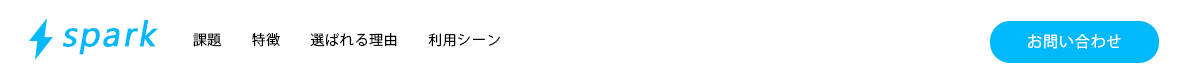
<style>
.page{position:relative;width:1200px;height:80px;background:#ffffff}
.page>*{position:absolute;margin:0}
.t1{font:34.9px "Gadugi";letter-spacing:0.05em;color:#00b9fb;font-weight:bold;font-style:italic}
.t2{font:14px "KozGoPr6N-Regular";letter-spacing:0.05em;color:#000000}
.t3{font:15.1px "KozGoPr6N-Regular";letter-spacing:0.05em;color:#ffffff}
</style>
<div class="page">
<p class="t1" style="left:63px;top:20px;width:95px;height:35px">spark</p>
<p class="t2" style="left:193px;top:33px;width:307px;height:14px">課題　　特徴　　選ばれる理由　　利用シーン</p>
<p class="t3" style="left:1028px;top:34px;width:93px;height:15px">お問い合わせ</p>
</div>
